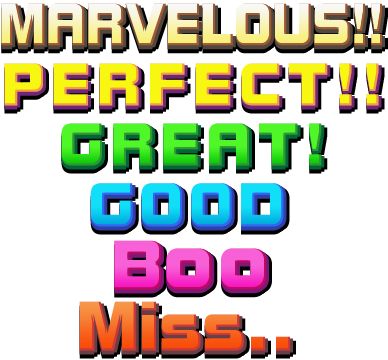
<style>
.page{position:relative;width:388px;height:360px;background:#ffffff}
.page>*{position:absolute;margin:0}
.t1{font:59.3px "Bolster";letter-spacing:-0.01em;scale:0.9 1}
.t2{font:59.3px "Bolster";letter-spacing:0.11em;color:#f8f711}
.t3{font:59.3px "Bolster";letter-spacing:0.12em;color:#f8f711}
.t4{font:59.3px "Bolster";letter-spacing:0.13em;color:#f8f711}
.t5{font:59.3px "Bolster";letter-spacing:0.11em;color:#41f720}
.t6{font:61.2px "Bolster";letter-spacing:0.075em}
.t7{font:79px "Bolster";letter-spacing:0.05em}
.t8{font:69.1px "Bolster"}
</style>
<div class="page">
<p class="t1" style="left:1px;top:3px;width:381px;height:43px">MARVELOUS!!</p>
<p class="t2" style="left:4px;top:63px;width:375px;height:43px">PERFEC<span class="t3">T</span><span class="t4">!</span><span class="t3">!</span></p>
<p class="t5" style="left:61px;top:123px;width:261px;height:43px">GREAT!</p>
<p class="t6" style="left:90px;top:183px;width:194px;height:44px">GOOD</p>
<p class="t7" style="left:114px;top:240px;width:152px;height:50px"><span class="t8">B</span>oo</p>
<p class="t8" style="left:79px;top:301px;width:211px;height:50px">Miss..</p>
</div>
